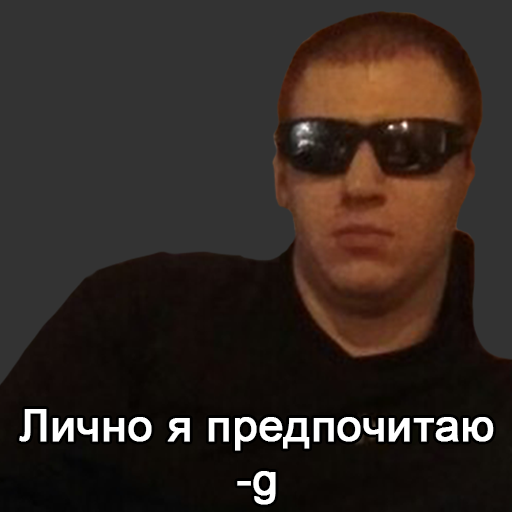
<style>
.page{position:relative;width:512px;height:512px;background:#333333}
.page>*{position:absolute;margin:0}
.t1{font:45px "ArialMT";color:#ffffff;font-weight:bold}
</style>
<div class="page">
<p class="t1" style="left:19px;top:409px;width:475px;height:96px;text-align:center">Лично я предпочитаю<br>-g</p>
</div>
